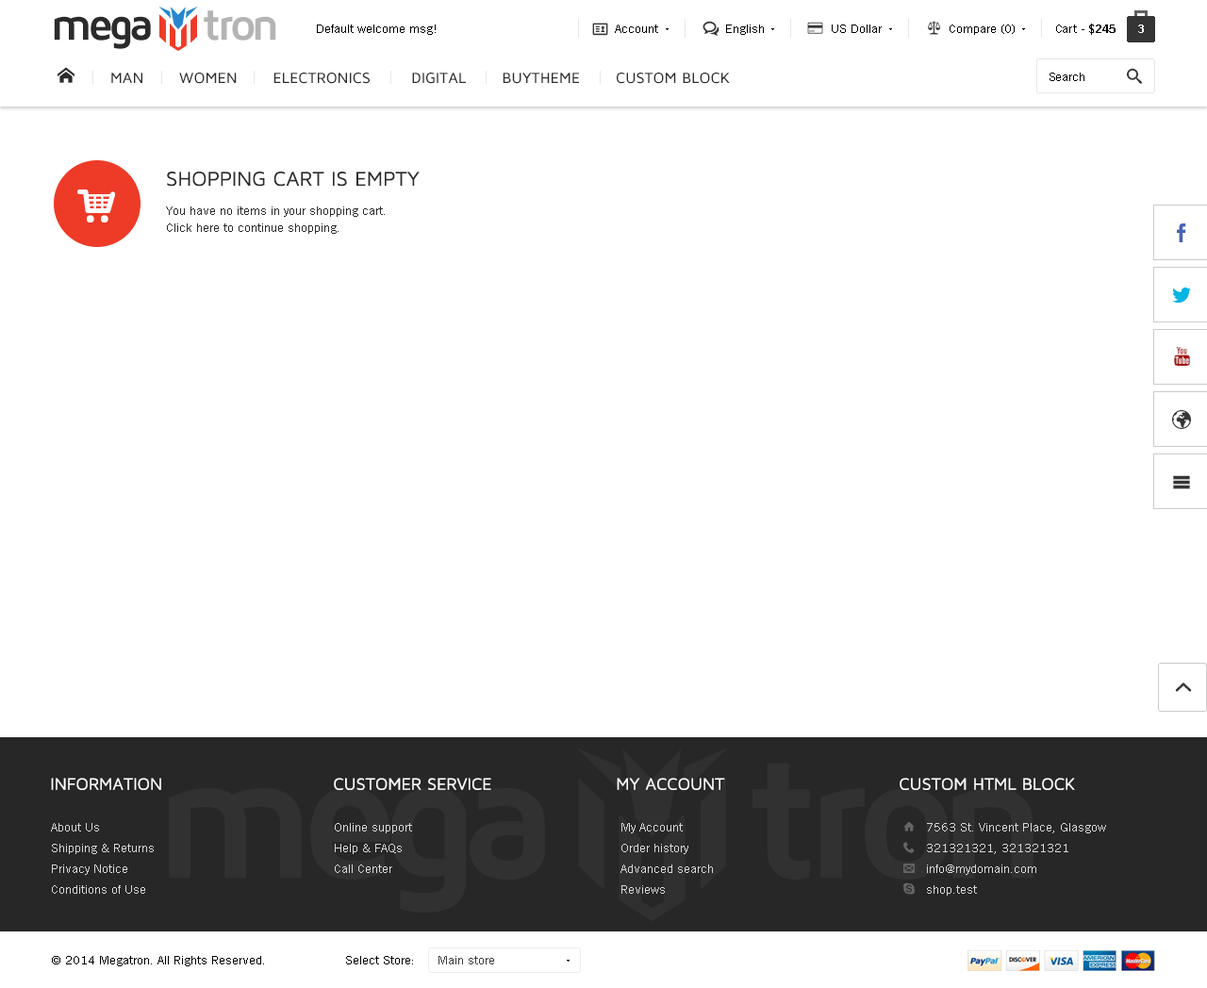
<style>
.page{position:relative;width:1207px;height:988px;background:#ffffff}
.page>*{position:absolute;margin:0}
.t1{font:45.3px "MavenProBold";letter-spacing:-0.1em;color:#2b2b2b}
.t2{font:45.3px "MavenProBold";letter-spacing:-0.1em;color:#b4b4b4}
.t3{font:12.3px "TradeGothicW01-Roman";color:#000000}
.t4{font:12.3px "TradeGothicW01-Bold2";color:#000000}
.t5{font:11.3px "TradeGothicW01-Bold2";color:#ffffff}
.t6{font:20.7px "MavenProRegular";color:#2b2b2b;text-transform:uppercase}
.t7{font:12.3px/17px "TradeGothicW01-Roman";color:#2b2b2b}
.t8{font:17px "MavenProRegular";color:#ffffff;text-transform:uppercase}
.t9{font:12.3px/20.7px "TradeGothicW01-Roman";color:#d9d9d9}
.t10{font:12.3px "TradeGothicW01-Roman";color:#3c3c3c}
</style>
<div class="page">
<p class="t1" style="left:54px;top:10px;width:222px;height:39px">mega     <span class="t2">tron</span></p>
<p class="t3" style="left:317px;top:25px;width:119px;height:10px">Default welcome msg!</p>
<p class="t3" style="left:615px;top:25px;width:43px;height:8px">Account</p>
<p class="t3" style="left:726px;top:25px;width:38px;height:10px">English</p>
<p class="t3" style="left:832px;top:25px;width:50px;height:8px">US Dollar</p>
<p class="t3" style="left:949px;top:25px;width:65px;height:10px">Compare (0)</p>
<p class="t3" style="left:1056px;top:24px;width:59px;height:11px">Cart - <span class="t4">$245</span></p>
<p class="t5" style="left:1138px;top:25px;width:6px;height:8px">3</p>
<p class="t3" style="left:1049px;top:73px;width:35px;height:8px">Search</p>
<p class="t6" style="left:167px;top:172px;width:253px;height:15px">Shopping Cart is Empty</p>
<p class="t7" style="left:166px;top:206px;width:219px;height:28px">You have no items in your shopping cart.<br>Click here to continue shopping.</p>
<p class="t8" style="left:51px;top:778px;width:110px;height:12px">Information</p>
<p class="t8" style="left:334px;top:778px;width:157px;height:12px">customer service</p>
<p class="t8" style="left:617px;top:778px;width:108px;height:12px">My account</p>
<p class="t8" style="left:899px;top:778px;width:176px;height:12px">CUSTOM HTML BLOCK</p>
<p class="t9" style="left:51px;top:823px;width:103px;height:71px">About Us<br>Shipping &amp; Returns<br>Privacy Notice<br>Conditions of Use</p>
<p class="t9" style="left:335px;top:823px;width:77px;height:50px">Online support<br>Help &amp; FAQs<br>Call Center</p>
<p class="t9" style="left:620px;top:823px;width:93px;height:71px">My Account<br>Order history<br>Advanced search<br>Reviews</p>
<p class="t9" style="left:927px;top:823px;width:179px;height:73px">7563 St. Vincent Place, Glasgow<br>321321321, 321321321<br>info@mydomain.com<br>shop.test</p>
<p class="t3" style="left:52px;top:956px;width:212px;height:10px">© 2014 Megatron. All Rights Reserved.</p>
<p class="t3" style="left:346px;top:956px;width:67px;height:9px">Select Store:</p>
<p class="t10" style="left:438px;top:956px;width:56px;height:9px">Main store</p>
</div>
